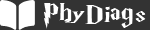
<style>
.page{position:relative;width:150px;height:30px;background:#333333}
.page>*{position:absolute;margin:0}
.t1{font:27.1px "HarryP";color:#ffffff;scale:1.44 1}
</style>
<div class="page">
<p class="t1" style="left:44px;top:3px;width:102px;height:26px">PhyDiags</p>
</div>
